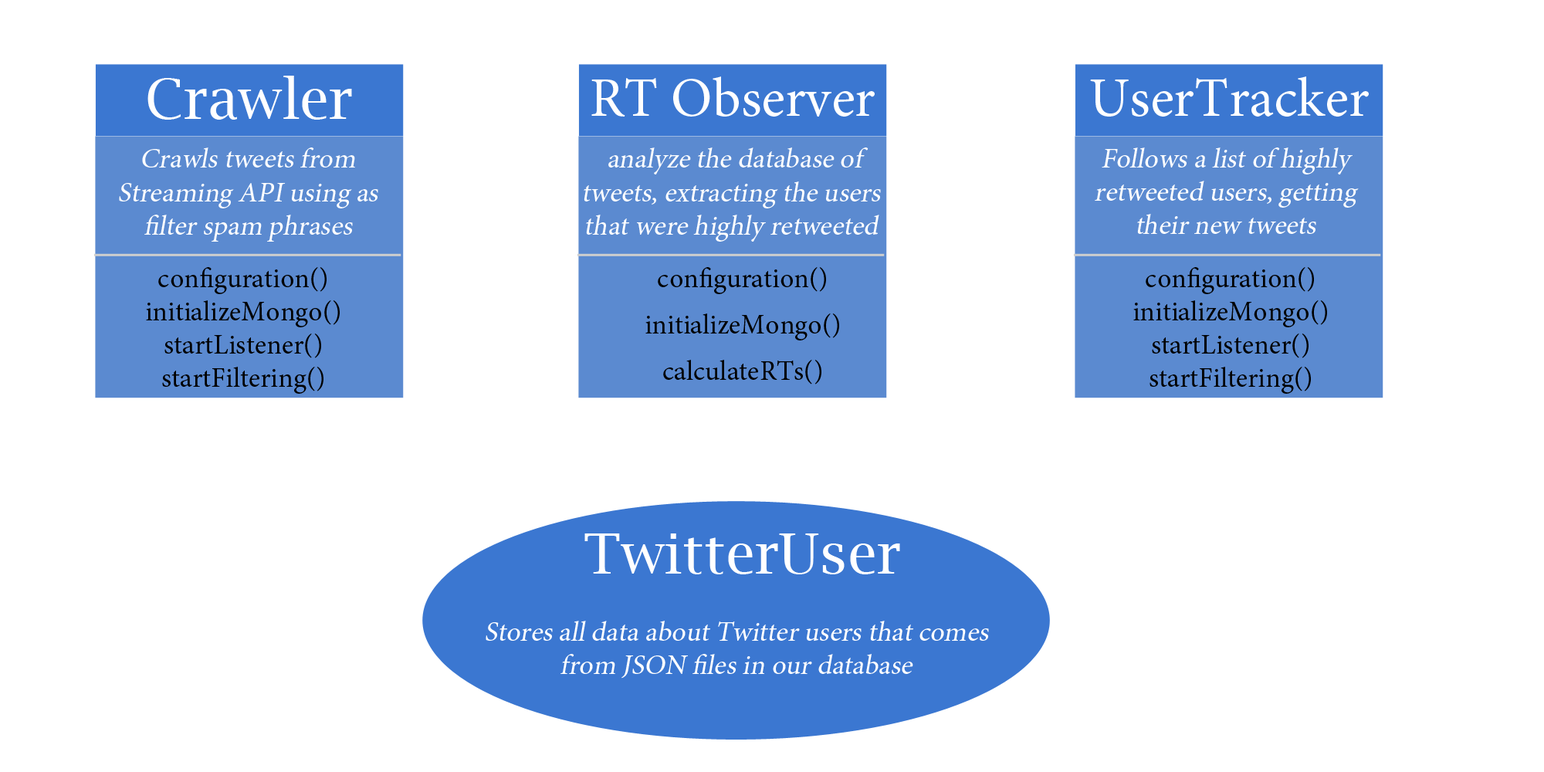
<style>
.page{position:relative;width:1544px;height:772px;background:#ffffff}
.page>*{position:absolute;margin:0}
.t1{font:55.6px "LucidaBright";color:#ffffff}
.t2{font:55.6px "MinionPro-Regular";color:#ffffff}
.t3{font:27.8px "MinionPro-Regular";color:#ffffff;font-style:italic}
.t4{font:27.8px "MinionPro-Regular";color:#000000}
</style>
<div class="page">
<p class="t1" style="left:147px;top:76px;width:205px;height:44px">Crawler</p>
<p class="t2" style="left:591px;top:76px;width:284px;height:41px">RT Observer</p>
<p class="t2" style="left:1090px;top:76px;width:279px;height:41px">UserTracker</p>
<p class="t3" style="left:119px;top:147px;width:259px;height:95px;text-align:center">Crawls tweets from <br>Streaming API using as <br>filter spam phrases</p>
<p class="t3" style="left:584px;top:147px;width:297px;height:95px;text-align:center">analyze the database of tweets, extracting the users that were highly retweeted</p>
<p class="t3" style="left:1095px;top:147px;width:264px;height:87px;text-align:center">Follows a list of highly retweeted users, getting their new tweets</p>
<p class="t4" style="left:146px;top:267px;width:194px;height:127px;text-align:center">configuration()<br>initializeMongo()<br>startListener()<br>startFiltering()</p>
<p class="t4" style="left:646px;top:267px;width:193px;height:118px;text-align:center">configuration()<br><br>initializeMongo()<br><br>calculateRTs()</p>
<p class="t4" style="left:1134px;top:267px;width:193px;height:127px;text-align:center">configuration()<br>initializeMongo()<br>startListener()<br>startFiltering()</p>
<p class="t1" style="left:585px;top:534px;width:315px;height:40px">TwitterUser</p>
<p class="t3" style="left:486px;top:621px;width:503px;height:58px;text-align:center">Stores all data about Twitter users that comes from JSON files in our database</p>
</div>
